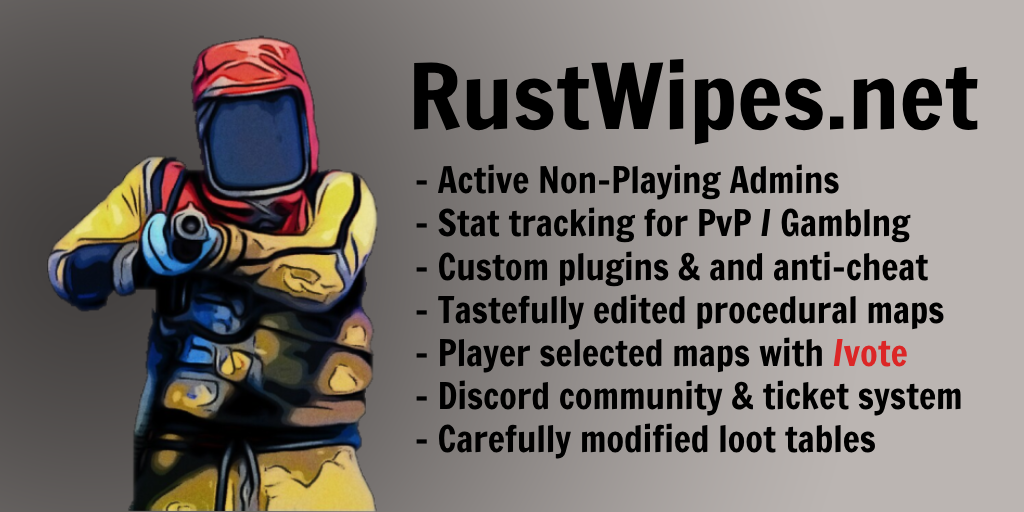
<style>
.page{position:relative;width:1024px;height:512px}
.page>*{position:absolute;margin:0}
.t1{font:88.7px "FrancoisOne-Regular";color:#000000;scale:1.08 1}
.t2{font:36px "FrancoisOne-Regular";color:#000000}
.t3{font:36px "FrancoisOne-Regular";color:#dc2626}
</style>
<div class="page">
<p class="t1" style="left:414px;top:58px;width:564px;height:87px">RustWipes.net</p>
<p class="t2" style="left:416px;top:164px;width:545px;height:295px">- Active Non-Playing Admins<br>- Stat tracking for PvP / Gamblng<br>- Custom plugins &amp; and anti-cheat<br>- Tastefully edited procedural maps<br>- Player selected maps with <span class="t3">/vote <br></span>- Discord community &amp; ticket system<br>- Carefully modified loot tables</p>
</div>
